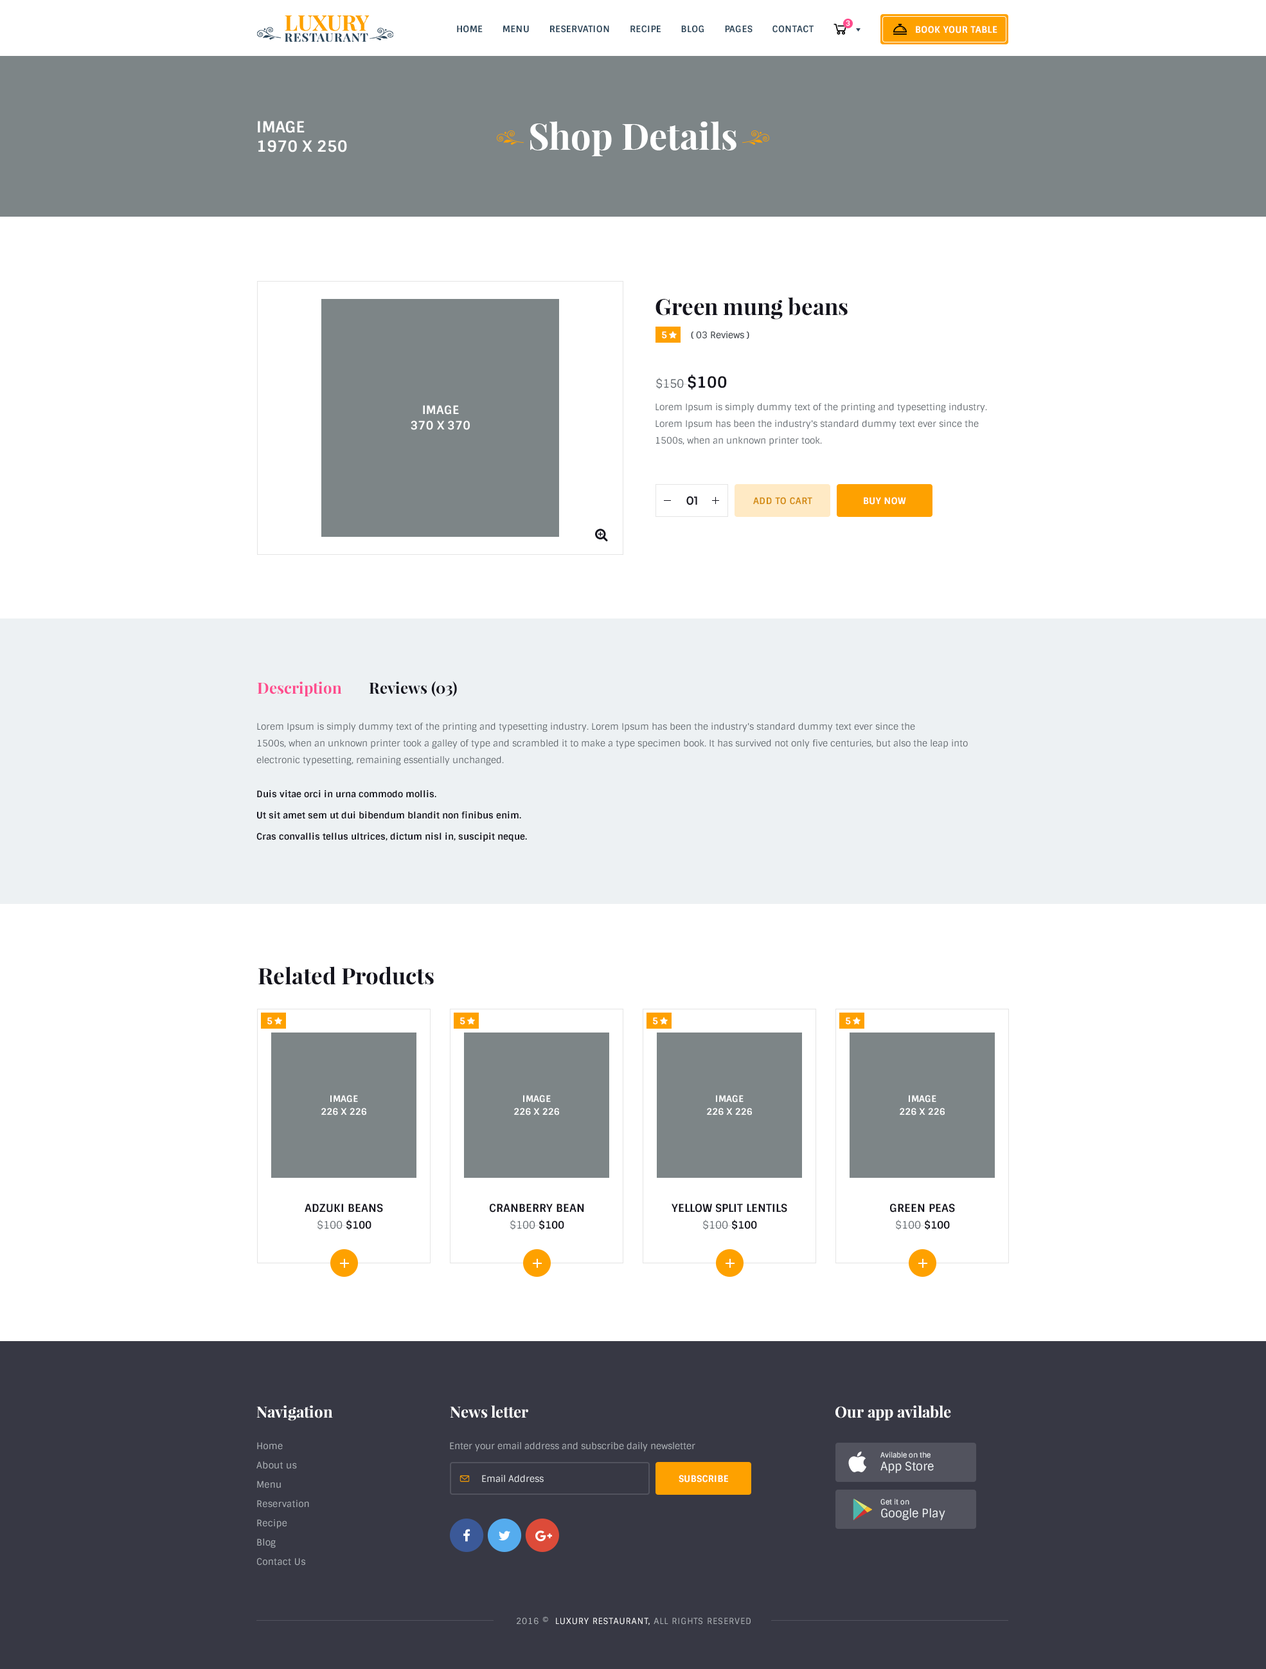
<style>
.page{position:relative;width:1266px;height:1669px;background:#ffffff}
.page>*{position:absolute;margin:0}
.t1{font:9px "Sintony-Bold";letter-spacing:0.025em;color:#2c465a;text-transform:uppercase}
.t2{font:7.1px "Sintony-Bold";letter-spacing:0.025em;color:#ffffff;text-transform:uppercase}
.t3{font:9px "Sintony-Bold";letter-spacing:0.025em;color:#ffffff;text-transform:uppercase}
.t4{font:15.4px/19.3px "Sintony-Bold";letter-spacing:0.005em;color:#ffffff;text-transform:uppercase}
.t5{font:36px "PlayfairDisplay-Bold";color:#ffffff}
.t6{font:22.5px "PlayfairDisplay-Bold";color:#14141d}
.t7{font:9px "Sintony-Bold";color:#ffffff;text-transform:uppercase}
.t8{font:9px "Sintony";color:#363d43}
.t9{font:11.6px "Sintony";color:#5c6369}
.t10{font:15.4px "Sintony-Bold";color:#14141d}
.t11{font:11.6px/15.4px "Sintony-Bold";letter-spacing:0.005em;color:#ffffff;text-transform:uppercase}
.t12{font:9px/16.7px "Sintony";color:#5c6369}
.t13{font:11.6px "Montserrat-Regular";color:#14141d}
.t14{font:9px "Sintony-Bold";letter-spacing:0.025em;color:#d38a0c;text-transform:uppercase}
.t15{font:15.4px "PlayfairDisplay-Bold";color:#14141d}
.t16{font:15.4px "PlayfairDisplay-Bold";color:#fe4c8d}
.t17{font:9px/21.2px "Sintony-Bold";color:#14141d}
.t18{font:9px/12.9px "Sintony-Bold";letter-spacing:0.005em;color:#ffffff;text-transform:uppercase}
.t19{font:10.9px "Sintony-Bold";color:#14141d;text-transform:uppercase}
.t20{font:10.3px "Sintony";color:#5c6369}
.t21{font:10.3px "Sintony-Bold";color:#14141d}
.t22{font:15.4px "PlayfairDisplay-Bold";color:#ffffff}
.t23{font:9px/19.3px "Sintony";letter-spacing:0.025em;color:#adb2b7}
.t24{font:9px "Sintony";color:#adb2b7}
.t25{font:7.1px/12.9px "Sintony";color:#edf1f3}
.t26{font:11.6px/12.9px "Sintony";color:#edf1f3}
.t27{font:9px "Sintony";color:#e6e9eb}
.t28{font:8.4px "Sintony";letter-spacing:0.075em;color:#adb2b7;text-transform:uppercase}
.t29{font:8.4px "Sintony";letter-spacing:0.075em;color:#ffffff;text-transform:uppercase}
</style>
<div class="page">
<p class="t1" style="left:457px;top:25px;width:357px;height:8px">Home       menu       reservation       recipe       blog       Pages       contact</p>
<p class="t2" style="left:846px;top:20px;width:5px;height:6px">3</p>
<p class="t3" style="left:916px;top:26px;width:82px;height:7px">Book your table</p>
<p class="t4" style="left:258px;top:121px;width:89px;height:31px">Image<br>1970 x 250</p>
<p class="t5" style="left:530px;top:121px;width:207px;height:35px">Shop Details</p>
<p class="t6" style="left:656px;top:297px;width:192px;height:23px">Green mung beans</p>
<p class="t7" style="left:662px;top:331px;width:5px;height:8px">5</p>
<p class="t8" style="left:691px;top:331px;width:59px;height:8px">( 03 Reviews )</p>
<p class="t9" style="left:656px;top:374px;width:71px;height:16px">$150 <span class="t10">$100</span></p>
<p class="t11" style="left:411px;top:405px;width:59px;height:25px;text-align:center">Image<br>370 x 370</p>
<p class="t12" style="left:656px;top:403px;width:331px;height:43px">Lorem Ipsum is simply dummy text of the printing and typesetting industry. Lorem Ipsum has been the industry's standard dummy text ever since the 1500s, when an unknown printer took.</p>
<p class="t13" style="left:687px;top:496px;width:11px;height:9px">01</p>
<p class="t14" style="left:753px;top:497px;width:60px;height:8px">add to cart</p>
<p class="t3" style="left:864px;top:497px;width:42px;height:8px">buy now</p>
<p class="t15" style="left:257px;top:681px;width:200px;height:16px"><span class="t16">Description</span>       Reviews (03)</p>
<p class="t12" style="left:256px;top:723px;width:712px;height:43px">Lorem Ipsum is simply dummy text of the printing and typesetting industry. Lorem Ipsum has been the industry's standard dummy text ever since the <br>1500s, when an unknown printer took a galley of type and scrambled it to make a type specimen book. It has survived not only five centuries, but also the leap into electronic typesetting, remaining essentially unchanged.</p>
<p class="t17" style="left:256px;top:789px;width:271px;height:53px">Duis vitae orci in urna commodo mollis.<br>Ut sit amet sem ut dui bibendum blandit non finibus enim.<br>Cras convallis tellus ultrices, dictum nisl in, suscipit neque.</p>
<p class="t6" style="left:258px;top:966px;width:176px;height:19px">Related Products</p>
<p class="t7" style="left:267px;top:1017px;width:6px;height:8px">5</p>
<p class="t7" style="left:460px;top:1017px;width:5px;height:8px">5</p>
<p class="t7" style="left:653px;top:1017px;width:5px;height:8px">5</p>
<p class="t7" style="left:846px;top:1017px;width:5px;height:8px">5</p>
<p class="t18" style="left:321px;top:1095px;width:45px;height:20px;text-align:center">Image<br>226 x 226</p>
<p class="t18" style="left:514px;top:1095px;width:45px;height:20px;text-align:center">Image<br>226 x 226</p>
<p class="t18" style="left:707px;top:1095px;width:45px;height:20px;text-align:center">Image<br>226 x 226</p>
<p class="t18" style="left:900px;top:1095px;width:45px;height:20px;text-align:center">Image<br>226 x 226</p>
<p class="t19" style="left:305px;top:1203px;width:78px;height:9px">adzuki beans</p>
<p class="t19" style="left:490px;top:1203px;width:94px;height:9px">cranberry bean</p>
<p class="t19" style="left:672px;top:1203px;width:116px;height:9px">Yellow split lentils</p>
<p class="t19" style="left:890px;top:1203px;width:65px;height:9px">green peas</p>
<p class="t20" style="left:317px;top:1220px;width:55px;height:10px">$100 <span class="t21">$100</span></p>
<p class="t20" style="left:510px;top:1220px;width:54px;height:10px">$100 <span class="t21">$100</span></p>
<p class="t20" style="left:703px;top:1220px;width:54px;height:10px">$100 <span class="t21">$100</span></p>
<p class="t20" style="left:896px;top:1220px;width:54px;height:10px">$100 <span class="t21">$100</span></p>
<p class="t22" style="left:256px;top:1405px;width:77px;height:16px">Navigation</p>
<p class="t22" style="left:450px;top:1405px;width:78px;height:13px">News letter</p>
<p class="t22" style="left:836px;top:1405px;width:115px;height:16px">Our app avilable</p>
<p class="t23" style="left:256px;top:1442px;width:53px;height:123px">Home<br>About us<br>Menu<br>Reservation<br>Recipe<br>Blog<br>Contact Us</p>
<p class="t24" style="left:450px;top:1442px;width:246px;height:10px">Enter your email address and subscribe daily newsletter</p>
<p class="t25" style="left:881px;top:1452px;width:53px;height:21px">Avilable on the<br><span class="t26">App Store</span></p>
<p class="t27" style="left:482px;top:1475px;width:62px;height:7px">Email Address</p>
<p class="t3" style="left:679px;top:1475px;width:49px;height:7px">Subscribe</p>
<p class="t26" style="left:881px;top:1498px;width:65px;height:22px"><span class="t25">Get it on<br></span>Google Play</p>
<p class="t28" style="left:517px;top:1616px;width:234px;height:9px">2016 ©  <span class="t29">Luxury RestaurAnt,</span> All rights reserved</p>
</div>
